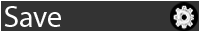
<style>
.page{position:relative;width:200px;height:32px;background:#333333}
.page>*{position:absolute;margin:0}
.t1{font:30px "MyriadPro-Regular";color:#ffffff}
</style>
<div class="page">
<p class="t1" style="left:4px;top:6px;width:57px;height:21px">Save</p>
</div>
